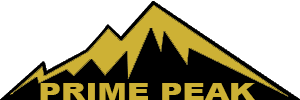
<style>
.page{position:relative;width:300px;height:100px;background:#ffffff}
.page>*{position:absolute;margin:0}
.t1{font:24.1px "Arial-Black";color:#cdb135;scale:1.29 1}
</style>
<div class="page">
<p class="t1" style="left:40px;top:83px;width:215px;height:17px">PRIME PEAK</p>
</div>
